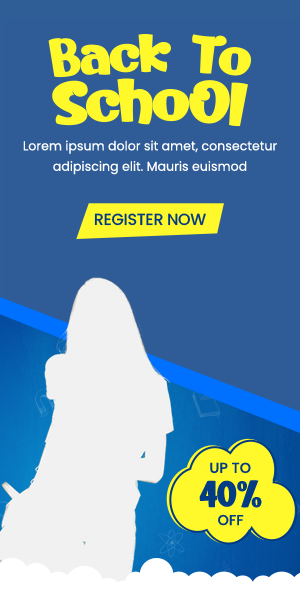
<style>
.page{position:relative;width:300px;height:600px;background:#2f5c96}
.page>*{position:absolute;margin:0}
.t1{font:51.7px "Kerokero";letter-spacing:-0.02em;color:#fff82b;scale:1.14 1}
.t2{font:58.5px "Kerokero";letter-spacing:-0.02em;color:#fff82b;scale:1.14 1}
.t3{font:12.7px/20.4px "Poppins-Regular";color:#ffffff}
.t4{font:16.1px "Poppins-Medium";letter-spacing:-0.02em;color:#023b83}
.t5{font:14.5px "Poppins-Medium";color:#023c85}
.t6{font:36.4px "Kerokero";color:#023c85}
</style>
<div class="page">
<p class="t1" style="left:48px;top:34px;width:203px;height:44px">Back To</p>
<p class="t2" style="left:52px;top:78px;width:196px;height:49px">SchoOl</p>
<p class="t3" style="left:23px;top:140px;width:254px;height:35px;text-align:center">Lorem ipsum dolor sit amet, consectetur adipiscing elit. Mauris euismod</p>
<p class="t4" style="left:94px;top:213px;width:112px;height:13px">REGISTER NOW</p>
<p class="t5" style="left:210px;top:462px;width:41px;height:12px">UP TO</p>
<p class="t6" style="left:199px;top:480px;width:63px;height:28px">40%</p>
<p class="t5" style="left:218px;top:514px;width:26px;height:12px">OFF</p>
</div>
